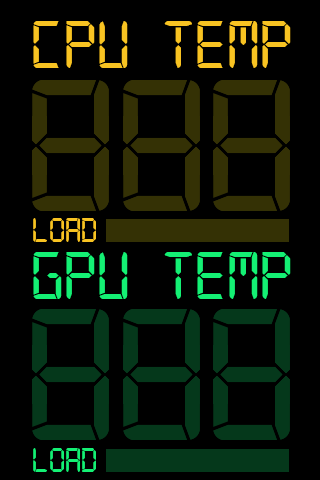
<style>
.page{position:relative;width:320px;height:480px;background:#000000}
.page>*{position:absolute;margin:0}
.t1{font:72px "Digital-7Mono";color:#f8c322}
.t2{font:36px "Digital-7Mono";color:#f8c322}
.t3{font:72px "Digital-7Mono";color:#14f074}
.t4{font:36px "Digital-7Mono";color:#14f074}
</style>
<div class="page">
<p class="t1" style="left:33px;top:21px;width:258px;height:47px">CPU TEMP</p>
<p class="t2" style="left:33px;top:218px;width:63px;height:24px">LOAD</p>
<p class="t3" style="left:33px;top:252px;width:258px;height:47px">GPU TEMP</p>
<p class="t4" style="left:33px;top:448px;width:63px;height:24px">LOAD</p>
</div>
